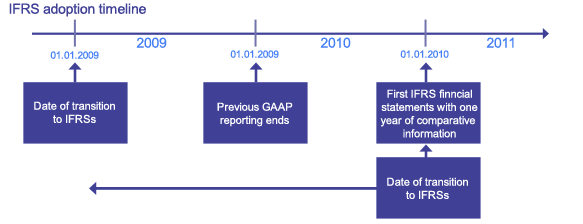
<style>
.page{position:relative;width:583px;height:224px;background:#ffffff}
.page>*{position:absolute;margin:0}
.t1{font:14px "ArialMT";color:#3f4096}
.t2{font:14px "ArialMT";color:#4580f7}
.t3{font:10px "ArialMT";color:#4580f7}
.t4{font:11px "ArialMT";color:#ffffff}
</style>
<div class="page">
<p class="t1" style="left:9px;top:3px;width:137px;height:14px">IFRS adoption timeline</p>
<p class="t2" style="left:136px;top:37px;width:31px;height:11px">2009</p>
<p class="t2" style="left:320px;top:37px;width:31px;height:11px">2010</p>
<p class="t2" style="left:486px;top:37px;width:28px;height:11px">2011</p>
<p class="t3" style="left:50px;top:51px;width:49px;height:8px">01.01.2009</p>
<p class="t3" style="left:230px;top:50px;width:49px;height:8px">01.01.2009</p>
<p class="t3" style="left:400px;top:50px;width:49px;height:8px">01.01.2010</p>
<p class="t4" style="left:380px;top:89px;width:98px;height:49px;text-align:center">First IFRS finncial<br>statements with one<br>year of comparative <br>information</p>
<p class="t4" style="left:34px;top:101px;width:81px;height:23px;text-align:center">Date of transition<br>to IFRSs</p>
<p class="t4" style="left:217px;top:102px;width:76px;height:25px;text-align:center">Previous GAAP<br>reporting ends</p>
<p class="t4" style="left:387px;top:177px;width:81px;height:23px;text-align:center">Date of transition<br>to IFRSs</p>
</div>
